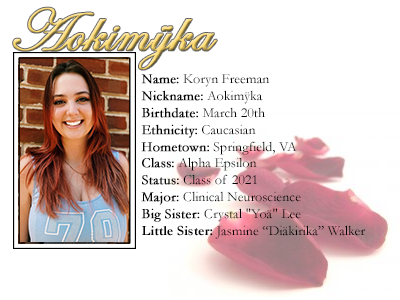
<style>
.page{position:relative;width:400px;height:300px;background:#ffffff}
.page>*{position:absolute;margin:0}
.t1{font:60px "EdwardianScriptITC";font-weight:bold}
.t2{font:14px "Garamond";color:#000000}
.t3{font:14px "Garamond";color:#000000;font-weight:bold}
.t4{font:14px "Garamond-Bold";color:#000000}
</style>
<div class="page">
<p class="t1" style="left:13px;top:7px;width:204px;height:63px">Aokimÿka</p>
<p class="t2" style="left:141px;top:74px;width:224px;height:165px"><span class="t3">Name:</span> Koryn Freeman<br><span class="t3">Nickname:</span> Aokimÿka<br><span class="t3">Birthdate:</span> March 20th<br><span class="t3">Ethnicity:</span> Caucasian<br><span class="t3">Hometown:</span> Springfield, VA<br><span class="t3">Class:</span> Alpha Epsilon<br><span class="t3">Status:</span> Class of 2021<br><span class="t3">Major:</span> Clinical Neuroscience<br><span class="t3">Big Sister: </span>Crystal "Yoä" Lee<br><span class="t4">Little Sister:</span> Jasmine “Diäkirika” Walker</p>
</div>
